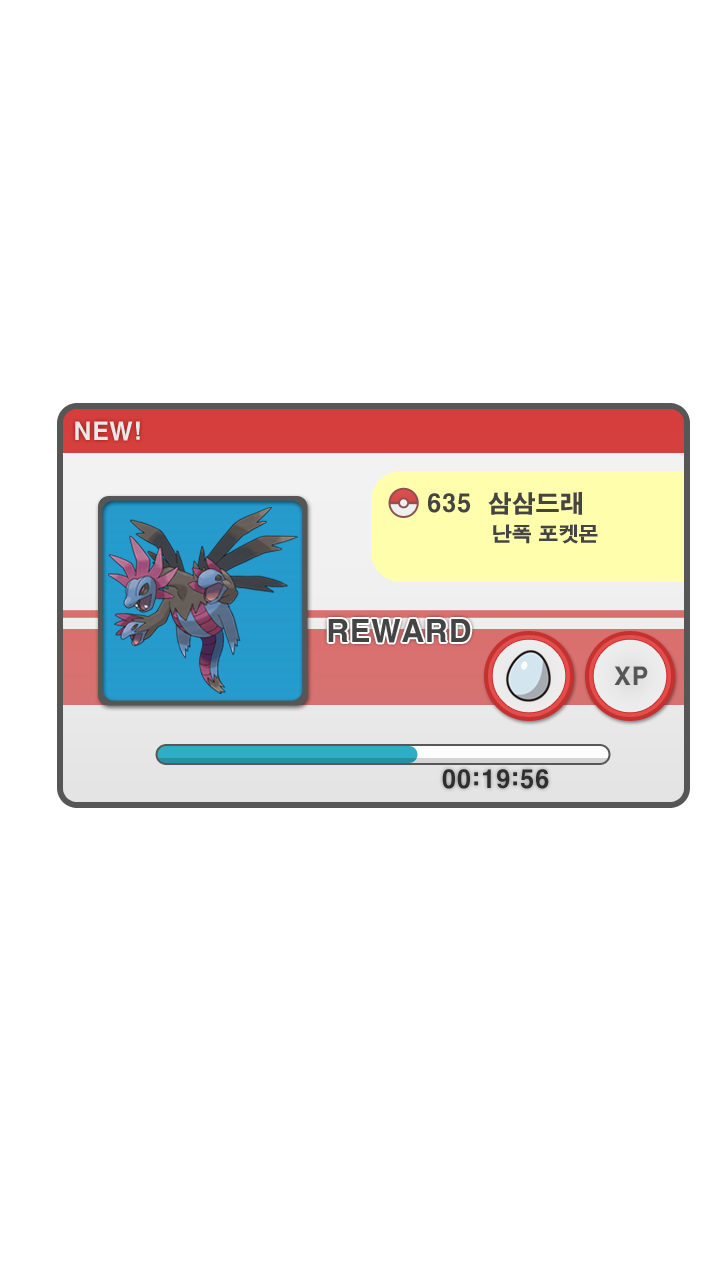
<style>
.page{position:relative;width:720px;height:1280px;background:#ffffff}
.page>*{position:absolute;margin:0}
.t1{font:24px "H2gtrE";color:#e9e9e9}
.t2{font:24px "H2gtrE";color:#444444}
.t3{font:20px "H2gtrE";color:#444444}
.t4{font:30px "H2gtrE";color:#444444}
.t5{font:24px "H2gtrE";color:#565656}
.t6{font:24px "H2gtrE";color:#2e2e2e}
</style>
<div class="page">
<p class="t1" style="left:75px;top:421px;width:65px;height:20px">NEW!</p>
<p class="t2" style="left:428px;top:492px;width:155px;height:23px">635  삼삼드래</p>
<p class="t3" style="left:493px;top:524px;width:105px;height:20px">난폭 포켓몬</p>
<p class="t4" style="left:328px;top:619px;width:143px;height:24px">REWARD</p>
<p class="t5" style="left:614px;top:666px;width:34px;height:19px">XP</p>
<p class="t6" style="left:442px;top:769px;width:107px;height:20px">00:19:56</p>
</div>
